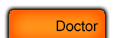
<style>
.page{position:relative;width:114px;height:38px}
.page>*{position:absolute;margin:0}
.t1{font:15.6px "Gautami";color:#000000}
</style>
<div class="page">
<p class="t1" style="left:56px;top:20px;width:42px;height:12px">Doctor</p>
</div>
